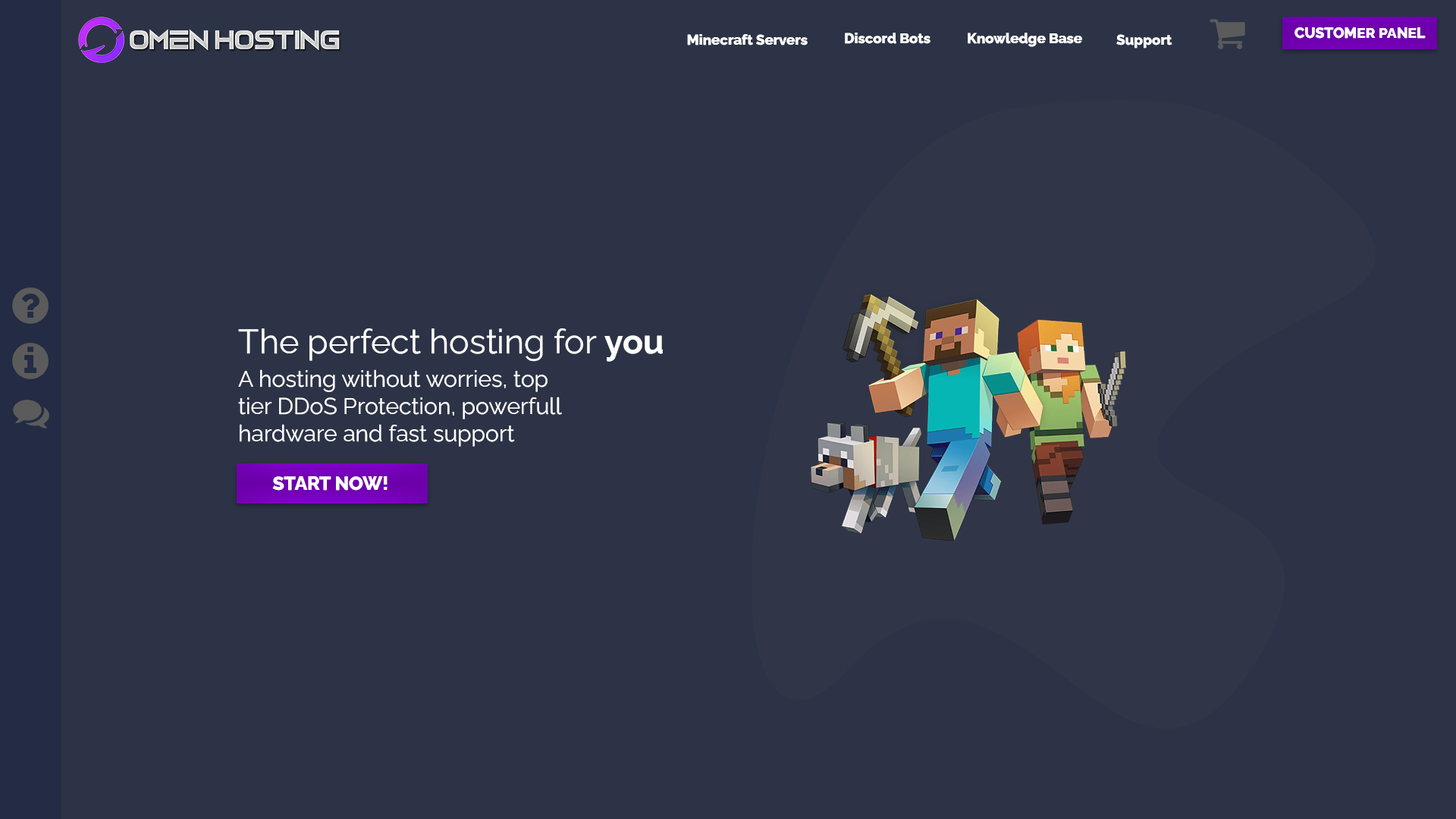
<style>
.page{position:relative;width:1456px;height:819px;background:#2c3346}
.page>*{position:absolute;margin:0}
.t1{font:14.6px "RalewayRoman-ExtraBold";color:#ffffff}
.t2{font:14.1px "RalewayRoman-ExtraBold";color:#ffffff}
.t3{font:33.9px "RalewayRoman-Regular";color:#ffffff}
.t4{font:33.9px "RalewayRoman-Bold";color:#ffffff}
.t5{font:22.7px "RalewayRoman-Regular";color:#ffffff}
.t6{font:18.7px "RalewayRoman-ExtraBold";color:#ffffff}
</style>
<div class="page">
<p class="t1" style="left:1294px;top:27px;width:132px;height:12px">CUSTOMER PANEL</p>
<p class="t2" style="left:687px;top:34px;width:121px;height:11px">Minecraft Servers</p>
<p class="t2" style="left:845px;top:33px;width:85px;height:11px">Discord Bots</p>
<p class="t2" style="left:968px;top:33px;width:114px;height:14px">Knowledge Base</p>
<p class="t2" style="left:1116px;top:34px;width:56px;height:15px">Support</p>
<p class="t3" style="left:238px;top:328px;width:425px;height:34px">The perfect hosting for <span class="t4">you</span></p>
<p class="t5" style="left:238px;top:369px;width:324px;height:78px">A hosting without worries, top<br>tier DDoS Protection, powerfull<br>hardware and fast support</p>
<p class="t6" style="left:272px;top:476px;width:116px;height:15px">START NOW!</p>
</div>
